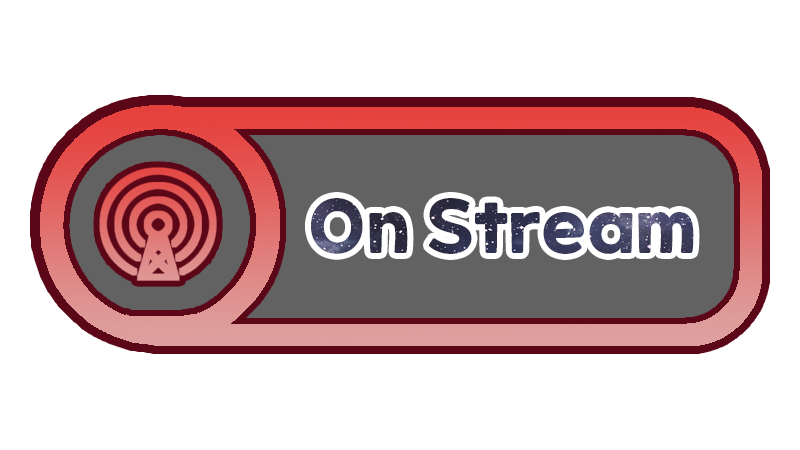
<style>
.page{position:relative;width:800px;height:450px;background:#ffffff}
.page>*{position:absolute;margin:0}
.t1{font:72px "ONEMobilePOPOTFRegular"}
</style>
<div class="page">
<p class="t1" style="left:311px;top:198px;width:383px;height:56px">On Stream</p>
</div>
